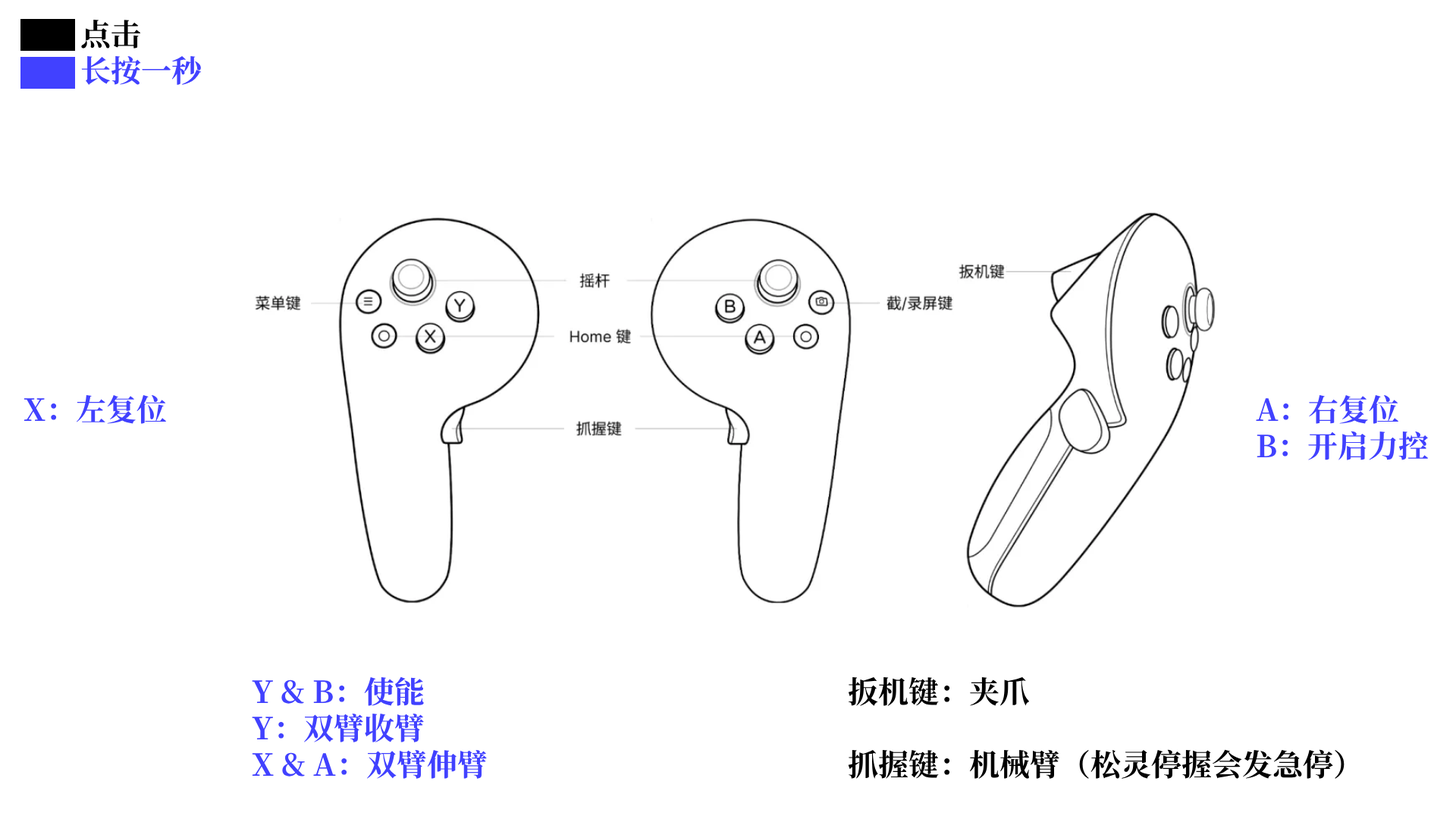
<style>
.page{position:relative;width:1456px;height:819px;background:#ffffff}
.page>*{position:absolute;margin:0}
.t1{font:30.3px "SourceHanSerifSC-Bold";color:#4141ff}
.t2{font:30.3px "SourceHanSerifSC-Bold";color:#000000}
</style>
<div class="page">
<p class="t1" style="left:81px;top:19px;width:121px;height:66px"><span class="t2">点击<br></span>长按一秒</p>
<p class="t1" style="left:24px;top:394px;width:142px;height:30px">X：左复位</p>
<p class="t1" style="left:1256px;top:394px;width:173px;height:66px">A：右复位<br>B：开启力控</p>
<p class="t1" style="left:252px;top:676px;width:235px;height:103px">Y &amp; B：使能<br>Y：双臂收臂<br>X &amp; A：双臂伸臂</p>
<p class="t2" style="left:848px;top:676px;width:497px;height:103px">扳机键：夹爪<br><br>抓握键：机械臂（松灵停握会发急停）</p>
</div>
